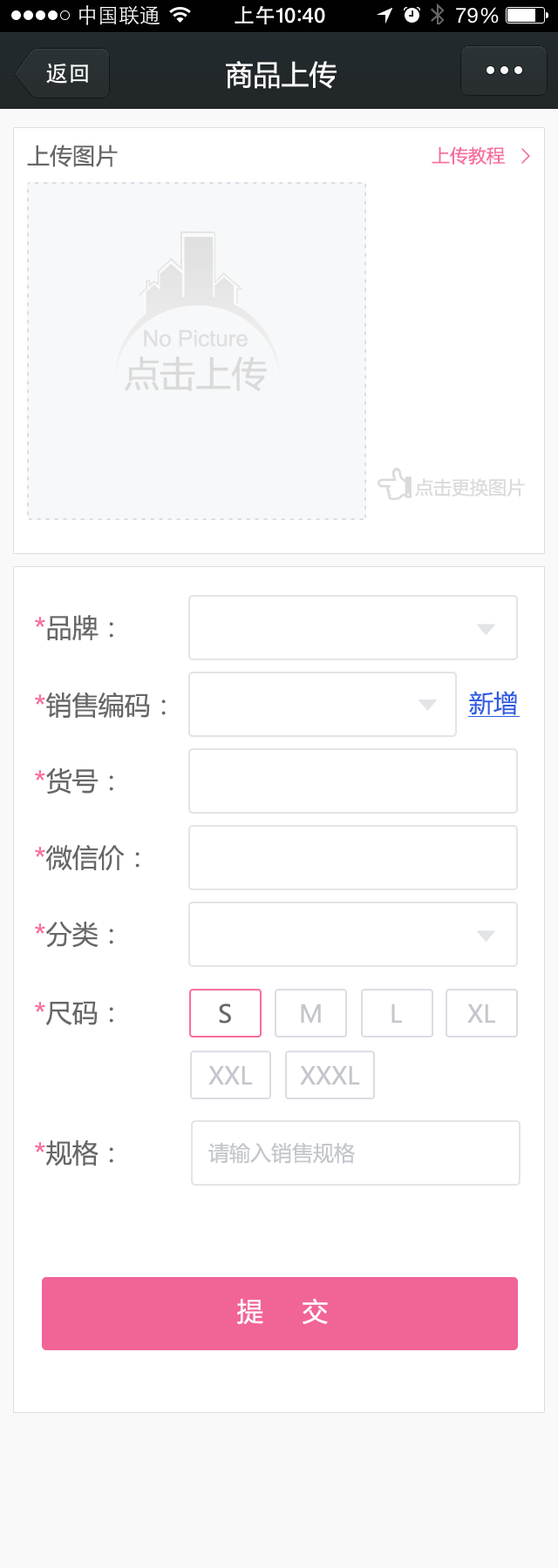
<style>
.page{position:relative;width:558px;height:1568px;background:#ffffff}
.page>*{position:absolute;margin:0}
.t1{font:27.9px "MicrosoftYaHei";color:#ffffff}
.t2{font:22.6px "MicrosoftYaHei";color:#676767}
.t3{font:18.3px "MicrosoftYaHei";color:#f86b9f}
.t4{font:22.6px "ArialMT";color:#dfdfdf}
.t5{font:35.7px "MicrosoftYaHei";color:#dadada}
.t6{font:18.3px "MicrosoftYaHei";color:#dadada}
.t7{font:26.1px "MicrosoftYaHei";color:#676767}
.t8{font:26.1px "MicrosoftYaHei";color:#f86b9f}
.t9{font:24.4px "MicrosoftYaHei";color:#2e5be2}
.t10{font:24.4px "MicrosoftYaHei";color:#676767}
.t11{font:24.4px "MicrosoftYaHei";color:#c3c6cb}
.t12{font:20.9px "MicrosoftYaHei";color:#c3c6cb}
.t13{font:26.1px "MicrosoftYaHei";color:#ffffff}
</style>
<div class="page">
<p class="t1" style="left:226px;top:61px;width:110px;height:28px">商品上传</p>
<p class="t2" style="left:27px;top:145px;width:91px;height:22px">上传图片</p>
<p class="t3" style="left:431px;top:146px;width:73px;height:19px">上传教程</p>
<p class="t4" style="left:144px;top:329px;width:103px;height:18px">No Picture</p>
<p class="t5" style="left:124px;top:356px;width:143px;height:36px">点击上传</p>
<p class="t6" style="left:415px;top:478px;width:109px;height:19px">点击更换图片</p>
<p class="t7" style="left:35px;top:614px;width:78px;height:27px"><span class="t8">*</span>品牌：</p>
<p class="t7" style="left:35px;top:692px;width:131px;height:26px"><span class="t8">*</span>销售编码：</p>
<p class="t9" style="left:469px;top:691px;width:48px;height:24px">新增</p>
<p class="t7" style="left:35px;top:767px;width:78px;height:27px"><span class="t8">*</span>货号：</p>
<p class="t7" style="left:35px;top:845px;width:104px;height:26px"><span class="t8">*</span>微信价：</p>
<p class="t7" style="left:35px;top:921px;width:78px;height:27px"><span class="t8">*</span>分类：</p>
<p class="t7" style="left:35px;top:1001px;width:78px;height:24px"><span class="t8">*</span>尺码：</p>
<p class="t10" style="left:219px;top:1004px;width:12px;height:20px">S</p>
<p class="t11" style="left:301px;top:1004px;width:20px;height:19px">M</p>
<p class="t11" style="left:391px;top:1004px;width:11px;height:19px">L</p>
<p class="t11" style="left:467px;top:1004px;width:28px;height:19px">XL</p>
<p class="t11" style="left:208px;top:1065px;width:45px;height:20px">XXL</p>
<p class="t11" style="left:300px;top:1065px;width:60px;height:20px">XXXL</p>
<p class="t7" style="left:35px;top:1139px;width:78px;height:27px"><span class="t8">*</span>规格：</p>
<p class="t12" style="left:208px;top:1142px;width:147px;height:22px">请输入销售规格</p>
<p class="t13" style="left:237px;top:1298px;width:91px;height:26px">提     交</p>
</div>
